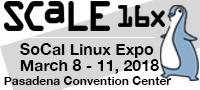
<style>
.page{position:relative;width:200px;height:90px;background:#d7d7d7}
.page>*{position:absolute;margin:0}
.t1{font:16px "HelveticaNeue-Bold";color:#000000}
.t2{font:12px "HelveticaNeue-Bold";color:#000000}
</style>
<div class="page">
<p class="t1" style="left:20px;top:43px;width:134px;height:15px">SoCal Linux Expo</p>
<p class="t1" style="left:20px;top:59px;width:139px;height:15px">March 8 - 11, 2018</p>
<p class="t2" style="left:4px;top:76px;width:167px;height:10px">Pasadena Convention Center</p>
</div>
